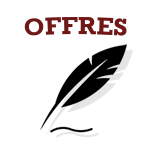
<style>
.page{position:relative;width:150px;height:150px;background:#ffffff}
.page>*{position:absolute;margin:0}
.t1{font:25px "Rockwell-Bold";color:#701818}
</style>
<div class="page">
<p class="t1" style="left:24px;top:17px;width:103px;height:19px">OFFRES</p>
</div>
